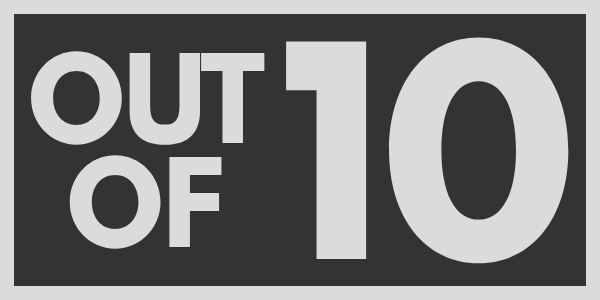
<style>
.page{position:relative;width:600px;height:300px;background:#333333}
.page>*{position:absolute;margin:0}
.t1{font:290px "SpartanMB-ExtraBold";color:#dcdadb}
.t2{font:120px "SpartanMB-ExtraBold";color:#dcdadb}
</style>
<div class="page">
<p class="t1" style="left:286px;top:37px;width:283px;height:227px">10</p>
<p class="t2" style="left:31px;top:51px;width:234px;height:198px;text-align:center">OUT<br>OF</p>
</div>
